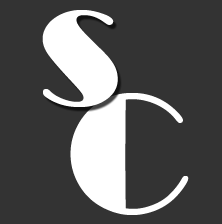
<style>
.page{position:relative;width:222px;height:224px;background:#333333}
.page>*{position:absolute;margin:0}
.t1{font:174.4px "Broadway";color:#ffffff}
</style>
<div class="page">
<p class="t1" style="left:42px;top:10px;width:76px;height:97px">s</p>
<p class="t1" style="left:70px;top:93px;width:119px;height:122px">C</p>
</div>
